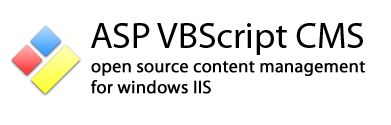
<style>
.page{position:relative;width:391px;height:125px;background:#ffffff}
.page>*{position:absolute;margin:0}
.t1{font:37.1px "MyriadPro-Regular";color:#000000}
.t2{font:18px "MyriadPro-Regular";color:#000000;font-weight:bold}
</style>
<div class="page">
<p class="t1" style="left:91px;top:23px;width:272px;height:32px">ASP VBScript CMS</p>
<p class="t2" style="left:91px;top:61px;width:274px;height:33px">open source content management<br>for windows IIS</p>
</div>
